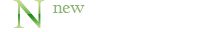
<style>
.page{position:relative;width:212px;height:32px;background:#ffffff}
.page>*{position:absolute;margin:0}
.t1{font:60px "ArabicTypesetting"}
.t2{font:18px "CalifornianFB-Reg";color:#89b670}
</style>
<div class="page">
<p class="t1" style="left:13px;top:0px;width:32px;height:28px">N</p>
<p class="t2" style="left:53px;top:5px;width:32px;height:8px">new</p>
</div>
